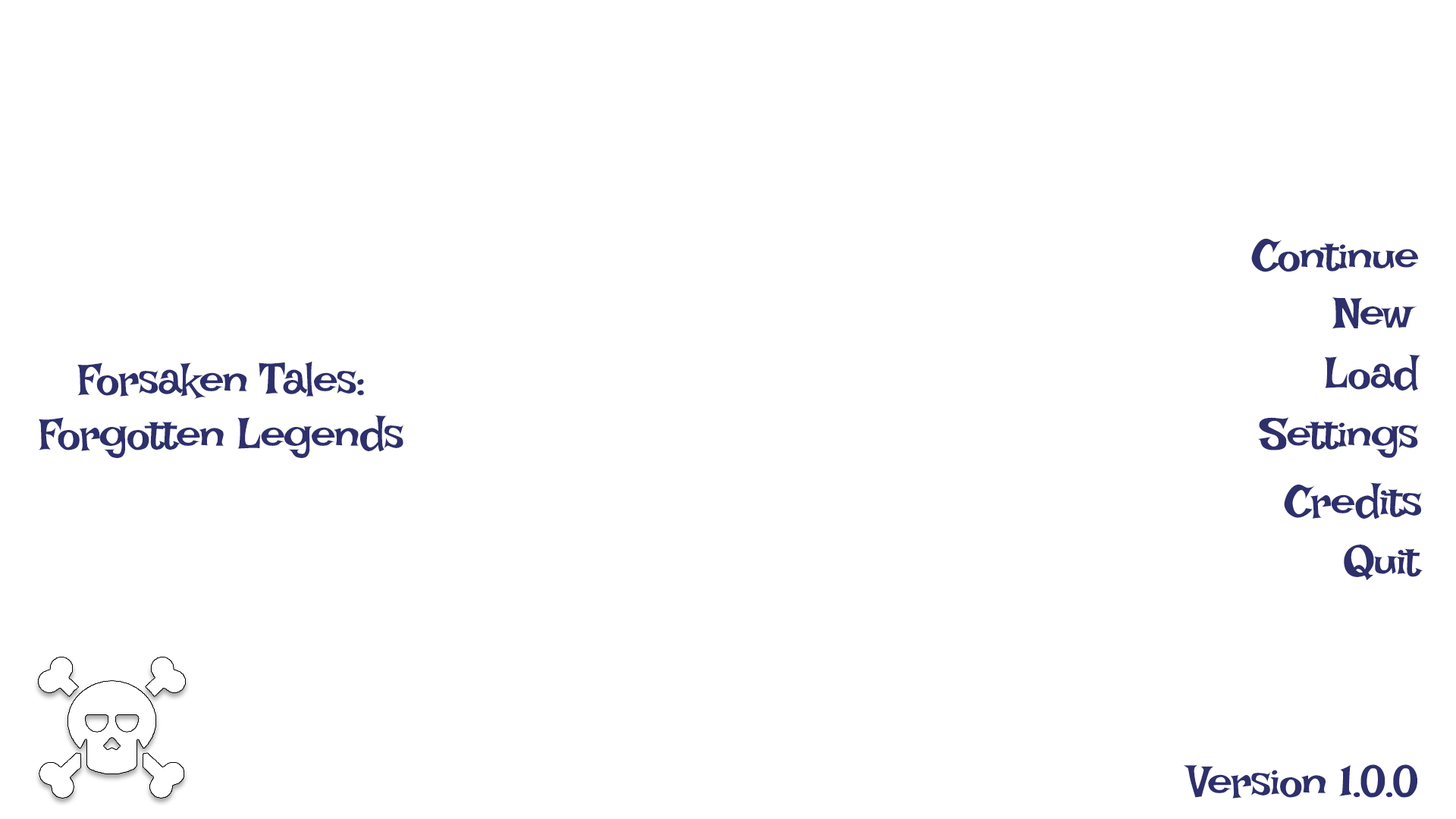
<style>
.page{position:relative;width:1456px;height:819px;background:#ffffff}
.page>*{position:absolute;margin:0}
.t1{font:45.5px "IrishGrover";letter-spacing:-0.04em;color:#2e306c}
</style>
<div class="page">
<p class="t1" style="left:1251px;top:238px;width:168px;height:34px">Continue</p>
<p class="t1" style="left:1332px;top:297px;width:85px;height:32px">New</p>
<p class="t1" style="left:39px;top:361px;width:365px;height:97px;text-align:center">Forsaken Tales:<br>Forgotten Legends</p>
<p class="t1" style="left:1324px;top:354px;width:97px;height:37px">Load</p>
<p class="t1" style="left:1257px;top:417px;width:161px;height:41px">Settings</p>
<p class="t1" style="left:1284px;top:482px;width:138px;height:37px">Credits</p>
<p class="t1" style="left:1344px;top:544px;width:79px;height:37px">Quit</p>
<p class="t1" style="left:1183px;top:764px;width:234px;height:35px">Version 1.0.0</p>
</div>
